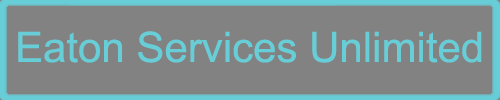
<style>
.page{position:relative;width:500px;height:100px;background:#838282}
.page>*{position:absolute;margin:0}
.t1{font:42px "ArialMT";color:#67cdd7}
</style>
<div class="page">
<p class="t1" style="left:18px;top:31px;width:464px;height:32px">Eaton Services Unlimited</p>
</div>
